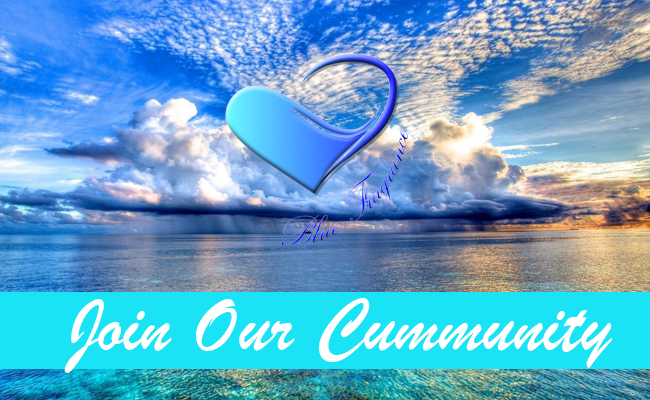
<style>
.page{position:relative;width:650px;height:400px}
.page>*{position:absolute;margin:0}
.t1{font:80px "BrushScriptMT";color:#ffffff}
</style>
<div class="page">
<p class="t1" style="left:64px;top:298px;width:548px;height:75px">Join Our Cummunity</p>
</div>
